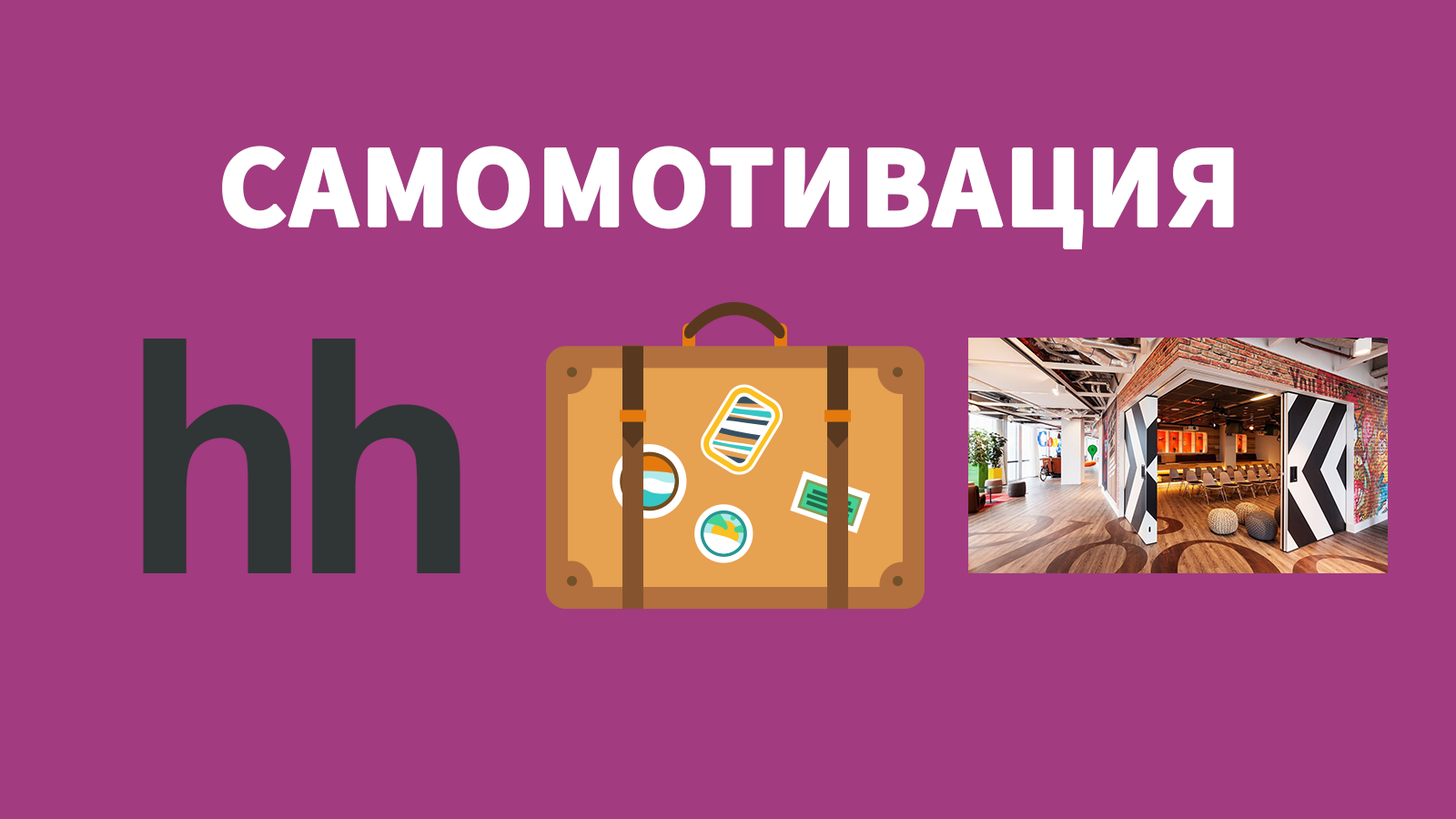
<style>
.page{position:relative;width:1456px;height:819px;background:#a23b80}
.page>*{position:absolute;margin:0}
.t1{font:117.4px "SourceSansPro-Bold";color:#ffffff;text-transform:uppercase;font-weight:bold}
</style>
<div class="page">
<p class="t1" style="left:222px;top:146px;width:1012px;height:103px">самомотивация</p>
</div>
